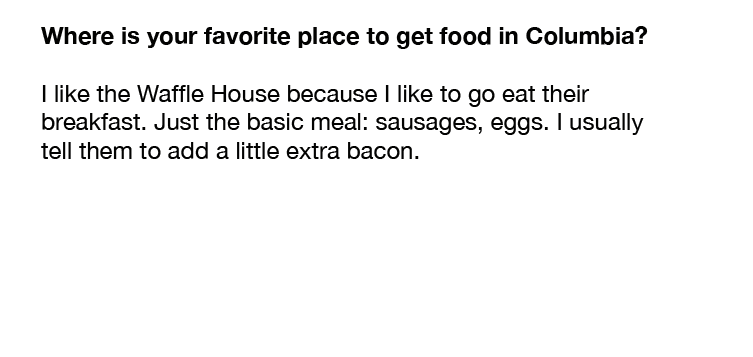
<style>
.page{position:relative;width:753px;height:357px;background:#ffffff}
.page>*{position:absolute;margin:0}
.t1{font:24px "HelveticaNeue";color:#020201}
.t2{font:24px "HelveticaNeue-Bold";color:#020201}
</style>
<div class="page">
<p class="t1" style="left:41px;top:26px;width:607px;height:133px"><span class="t2">Where is your favorite place to get food in Columbia?<br><br></span>I like the Waffle House because I like to go eat their <br>breakfast. Just the basic meal: sausages, eggs. I usually <br>tell them to add a little extra bacon.</p>
</div>
